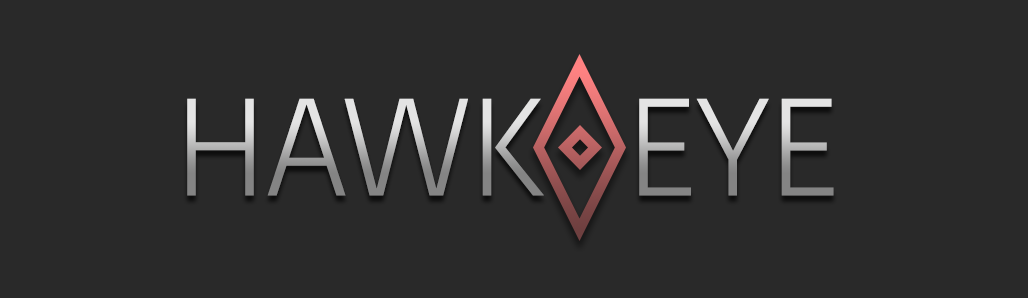
<style>
.page{position:relative;width:1028px;height:298px;background:#292929}
.page>*{position:absolute;margin:0}
.t1{font:137.5px "KohinoorBangla-Light"}
</style>
<div class="page">
<p class="t1" style="left:187px;top:98px;width:647px;height:98px">HAWK  EYE</p>
</div>
